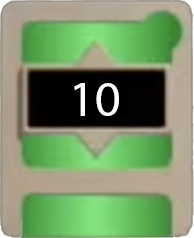
<style>
.page{position:relative;width:194px;height:238px}
.page>*{position:absolute;margin:0}
.t1{font:50px "MyriadPro-Regular";color:#ffffff}
</style>
<div class="page">
<p class="t1" style="left:74px;top:83px;width:45px;height:33px">10</p>
</div>
